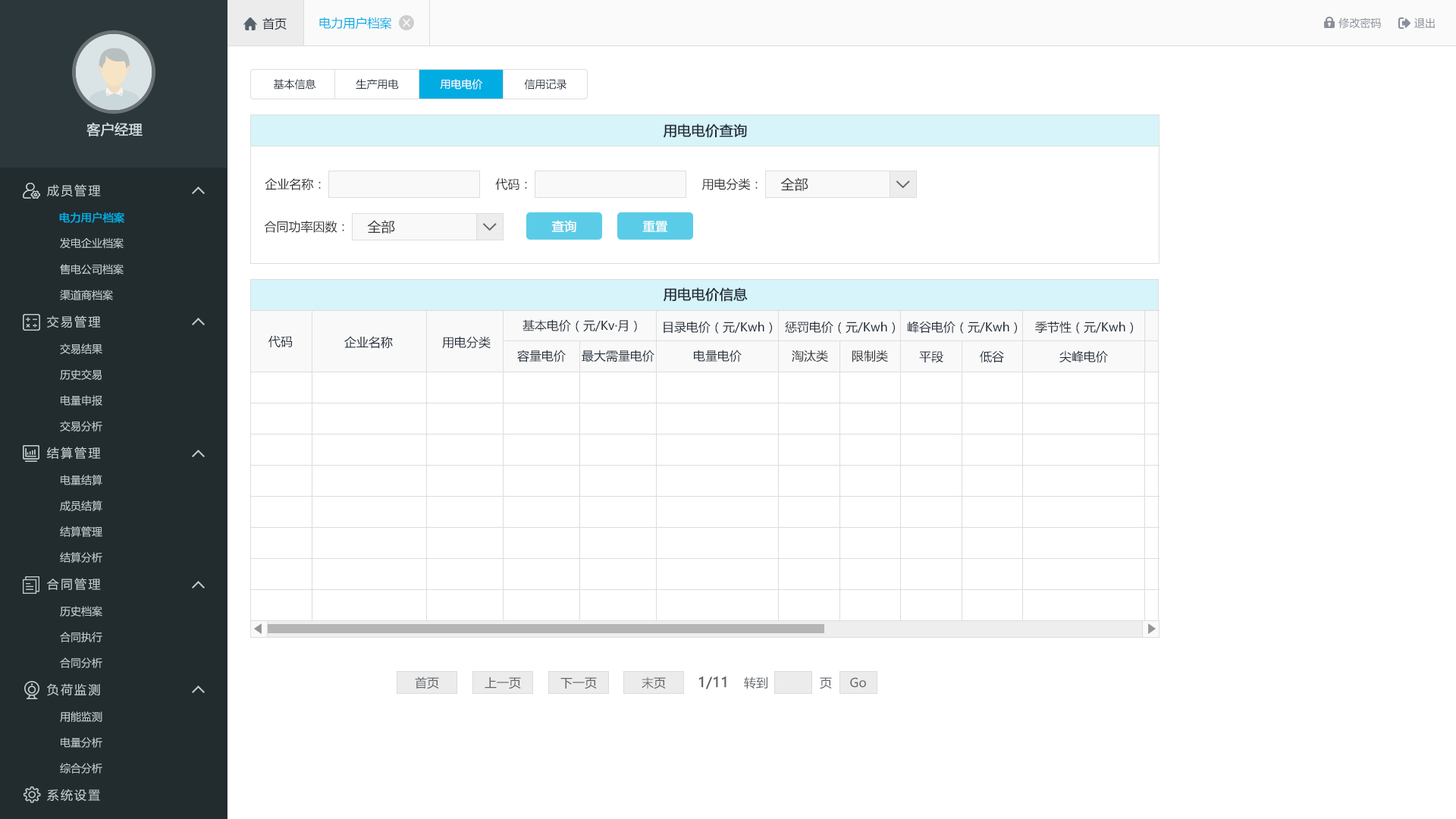
<style>
.page{position:relative;width:1456px;height:819px;background:#ffffff}
.page>*{position:absolute;margin:0}
.t1{font:12.1px "MicrosoftYaHei";color:#242e3b}
.t2{font:12.1px "MicrosoftYaHei";color:#00ace2}
.t3{font:10.6px "MicrosoftYaHei";color:#8a8f99}
.t4{font:10.6px "MicrosoftYaHei";color:#242e3b}
.t5{font:10.6px "MicrosoftYaHei";color:#ffffff}
.t6{font:13.6px "MicrosoftYaHei";color:#d1dce2;font-weight:bold}
.t7{font:13.6px "MicrosoftYaHei";color:#242e3b;font-weight:bold}
.t8{font:12.1px "MicrosoftYaHei";letter-spacing:0.14em;color:#c2cdd2}
.t9{font:12.1px "MicrosoftYaHei";color:#333333}
.t10{font:13.6px "MicrosoftYaHei";color:#333333}
.t11{font:10.6px "MicrosoftYaHei";color:#00ace2;font-weight:bold}
.t12{font:12.1px "MicrosoftYaHei";color:#ffffff;font-weight:bold}
.t13{font:10.6px "MicrosoftYaHei";color:#c2cdd2}
.t14{font:12.1px "MicrosoftYaHei";color:#61656b}
.t15{font:13.6px "MicrosoftYaHei";color:#61656b;font-weight:bold}
</style>
<div class="page">
<p class="t1" style="left:262px;top:17px;width:25px;height:13px">首页</p>
<p class="t2" style="left:319px;top:17px;width:73px;height:13px">电力用户档案</p>
<p class="t3" style="left:1338px;top:17px;width:43px;height:12px">修改密码</p>
<p class="t3" style="left:1414px;top:17px;width:21px;height:11px">退出</p>
<p class="t4" style="left:273px;top:79px;width:43px;height:10px">基本信息</p>
<p class="t4" style="left:356px;top:79px;width:43px;height:10px">生产用电</p>
<p class="t5" style="left:440px;top:79px;width:43px;height:10px">用电电价</p>
<p class="t4" style="left:524px;top:79px;width:42px;height:10px">信用记录</p>
<p class="t6" style="left:86px;top:122px;width:57px;height:14px">客户经理</p>
<p class="t7" style="left:664px;top:124px;width:83px;height:14px">用电电价查询</p>
<p class="t8" style="left:47px;top:184px;width:54px;height:13px">成员管理</p>
<p class="t9" style="left:265px;top:178px;width:56px;height:12px">企业名称：</p>
<p class="t9" style="left:495px;top:178px;width:32px;height:12px">代码：</p>
<p class="t9" style="left:702px;top:178px;width:56px;height:12px">用电分类：</p>
<p class="t10" style="left:780px;top:177px;width:28px;height:14px">全部</p>
<p class="t11" style="left:59px;top:212px;width:65px;height:11px">电力用户档案</p>
<p class="t9" style="left:264px;top:221px;width:80px;height:12px">合同功率因数：</p>
<p class="t10" style="left:367px;top:220px;width:28px;height:14px">全部</p>
<p class="t12" style="left:551px;top:220px;width:25px;height:12px">查询</p>
<p class="t12" style="left:642px;top:221px;width:26px;height:11px">重置</p>
<p class="t13" style="left:60px;top:237px;width:64px;height:12px">发电企业档案</p>
<p class="t13" style="left:60px;top:264px;width:64px;height:11px">售电公司档案</p>
<p class="t13" style="left:60px;top:290px;width:53px;height:10px">渠道商档案</p>
<p class="t7" style="left:664px;top:287px;width:84px;height:15px">用电电价信息</p>
<p class="t8" style="left:47px;top:315px;width:54px;height:13px">交易管理</p>
<p class="t1" style="left:522px;top:319px;width:115px;height:13px">基本电价（元/Kv·月）</p>
<p class="t1" style="left:664px;top:321px;width:108px;height:13px">目录电价（元/Kwh）</p>
<p class="t1" style="left:785px;top:321px;width:110px;height:13px">惩罚电价（元/Kwh）</p>
<p class="t1" style="left:907px;top:321px;width:110px;height:13px">峰谷电价（元/Kwh）</p>
<p class="t1" style="left:1035px;top:321px;width:98px;height:13px">季节性（元/Kwh）</p>
<p class="t1" style="left:268px;top:335px;width:25px;height:12px">代码</p>
<p class="t1" style="left:344px;top:336px;width:49px;height:13px">企业名称</p>
<p class="t1" style="left:442px;top:336px;width:49px;height:13px">用电分类</p>
<p class="t13" style="left:60px;top:344px;width:42px;height:10px">交易结果</p>
<p class="t1" style="left:517px;top:350px;width:49px;height:12px">容量电价</p>
<p class="t1" style="left:582px;top:350px;width:72px;height:12px">最大需量电价</p>
<p class="t1" style="left:694px;top:350px;width:48px;height:12px">电量电价</p>
<p class="t9" style="left:792px;top:350px;width:36px;height:12px">淘汰类</p>
<p class="t9" style="left:852px;top:350px;width:36px;height:12px">限制类</p>
<p class="t1" style="left:919px;top:351px;width:24px;height:11px">平段</p>
<p class="t1" style="left:980px;top:350px;width:24px;height:12px">低谷</p>
<p class="t1" style="left:1059px;top:350px;width:49px;height:13px">尖峰电价</p>
<p class="t13" style="left:60px;top:369px;width:42px;height:11px">历史交易</p>
<p class="t13" style="left:61px;top:395px;width:41px;height:11px">电量申报</p>
<p class="t13" style="left:60px;top:421px;width:42px;height:10px">交易分析</p>
<p class="t8" style="left:47px;top:447px;width:54px;height:13px">结算管理</p>
<p class="t13" style="left:61px;top:475px;width:41px;height:10px">电量结算</p>
<p class="t13" style="left:60px;top:500px;width:42px;height:11px">成员结算</p>
<p class="t13" style="left:60px;top:526px;width:42px;height:11px">结算管理</p>
<p class="t13" style="left:60px;top:552px;width:42px;height:11px">结算分析</p>
<p class="t8" style="left:47px;top:578px;width:54px;height:12px">合同管理</p>
<p class="t13" style="left:60px;top:606px;width:42px;height:11px">历史档案</p>
<p class="t13" style="left:60px;top:632px;width:42px;height:10px">合同执行</p>
<p class="t13" style="left:60px;top:657px;width:42px;height:11px">合同分析</p>
<p class="t14" style="left:415px;top:676px;width:24px;height:13px">首页</p>
<p class="t14" style="left:485px;top:677px;width:36px;height:12px">上一页</p>
<p class="t14" style="left:560px;top:677px;width:37px;height:12px">下一页</p>
<p class="t14" style="left:642px;top:676px;width:24px;height:13px">末页</p>
<p class="t15" style="left:698px;top:676px;width:28px;height:13px">1/11</p>
<p class="t14" style="left:744px;top:676px;width:23px;height:13px">转到</p>
<p class="t14" style="left:820px;top:677px;width:12px;height:12px">页</p>
<p class="t14" style="left:850px;top:677px;width:16px;height:11px">Go</p>
<p class="t8" style="left:47px;top:683px;width:53px;height:13px">负荷监测</p>
<p class="t13" style="left:60px;top:711px;width:42px;height:11px">用能监测</p>
<p class="t13" style="left:61px;top:737px;width:41px;height:11px">电量分析</p>
<p class="t13" style="left:60px;top:763px;width:42px;height:10px">综合分析</p>
<p class="t8" style="left:47px;top:789px;width:53px;height:13px">系统设置</p>
</div>
